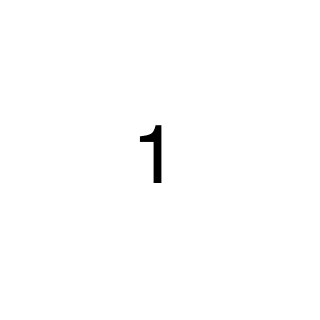
<style>
.page{position:relative;width:320px;height:320px;background:#ffffff}
.page>*{position:absolute;margin:0}
.t1{font:83px "Helvetica";color:#000000}
</style>
<div class="page">
<p class="t1" style="left:139px;top:125px;width:23px;height:58px">1</p>
</div>
